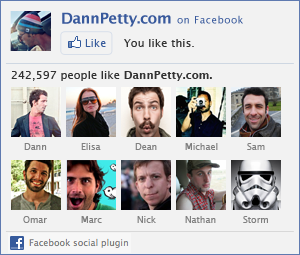
<style>
.page{position:relative;width:300px;height:255px;background:#f2f2f2}
.page>*{position:absolute;margin:0}
.t1{font:15px "LucidaGrande-Bold";letter-spacing:-0.025em;color:#38599c}
.t2{font:10px "LucidaGrande";letter-spacing:0.05em;color:#38599c}
.t3{font:10px "LucidaGrande";letter-spacing:0.05em;color:#365a9b}
.t4{font:11px "LucidaGrande";letter-spacing:0.01em;color:#323232}
.t5{font:11px "LucidaGrande-Bold";letter-spacing:0.01em;color:#323232}
.t6{font:9px "LucidaGrande";color:#808080}
</style>
<div class="page">
<p class="t1" style="left:62px;top:12px;width:109px;height:15px">DannPetty.com</p>
<p class="t2" style="left:177px;top:15px;width:66px;height:9px">on Facebook</p>
<p class="t3" style="left:85px;top:39px;width:21px;height:8px">Like</p>
<p class="t4" style="left:124px;top:39px;width:70px;height:8px">You like this.</p>
<p class="t4" style="left:11px;top:71px;width:201px;height:10px">242,597 people like <span class="t5">DannPetty.com.</span></p>
<p class="t6" style="left:24px;top:143px;width:23px;height:7px">Dann</p>
<p class="t6" style="left:81px;top:143px;width:20px;height:7px">Elisa</p>
<p class="t6" style="left:135px;top:143px;width:22px;height:7px">Dean</p>
<p class="t6" style="left:185px;top:143px;width:33px;height:7px">Michael</p>
<p class="t6" style="left:247px;top:143px;width:18px;height:7px">Sam</p>
<p class="t6" style="left:23px;top:216px;width:24px;height:7px">Omar</p>
<p class="t6" style="left:81px;top:216px;width:21px;height:7px">Marc</p>
<p class="t6" style="left:137px;top:216px;width:19px;height:7px">Nick</p>
<p class="t6" style="left:185px;top:216px;width:31px;height:7px">Nathan</p>
<p class="t6" style="left:243px;top:216px;width:25px;height:7px">Storm</p>
</div>
